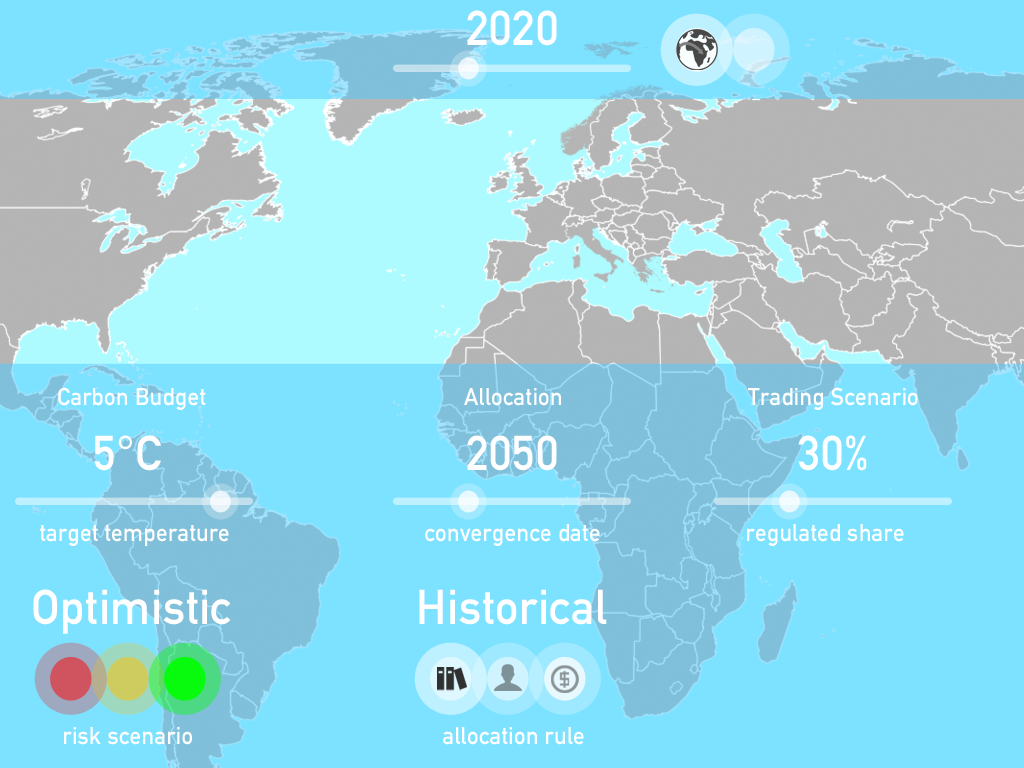
<style>
.page{position:relative;width:1024px;height:768px;background:#7de2ff}
.page>*{position:absolute;margin:0}
.t1{font:48px "DINAlternate-Bold";color:#ffffff}
.t2{font:24px "DINAlternate-Bold";color:#ffffff}
</style>
<div class="page">
<p class="t1" style="left:467px;top:10px;width:90px;height:36px">2020</p>
<p class="t2" style="left:58px;top:387px;width:148px;height:23px">Carbon Budget</p>
<p class="t2" style="left:464px;top:388px;width:97px;height:18px">Allocation</p>
<p class="t2" style="left:748px;top:387px;width:170px;height:23px">Trading Scenario</p>
<p class="t1" style="left:94px;top:435px;width:67px;height:36px">5°C</p>
<p class="t1" style="left:467px;top:435px;width:90px;height:36px">2050</p>
<p class="t1" style="left:798px;top:435px;width:69px;height:36px">30%</p>
<p class="t2" style="left:40px;top:525px;width:189px;height:21px">target temperature</p>
<p class="t2" style="left:425px;top:524px;width:175px;height:22px">convergence date</p>
<p class="t2" style="left:747px;top:524px;width:157px;height:22px">regulated share</p>
<p class="t1" style="left:33px;top:589px;width:198px;height:45px">Optimistic</p>
<p class="t1" style="left:419px;top:589px;width:188px;height:36px">Historical</p>
<p class="t2" style="left:64px;top:727px;width:128px;height:18px">risk scenario</p>
<p class="t2" style="left:443px;top:727px;width:141px;height:18px">allocation rule</p>
</div>
